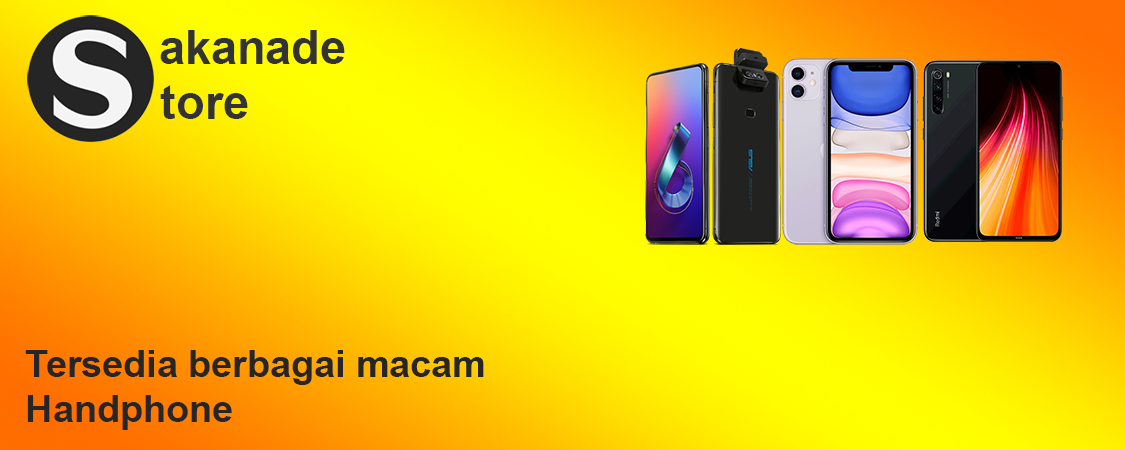
<style>
.page{position:relative;width:1125px;height:450px}
.page>*{position:absolute;margin:0}
.t1{font:47.4px "Arial-BoldMT";color:#333333}
.t2{font:37.5px "Arial-BoldMT";color:#262626}
</style>
<div class="page">
<p class="t1" style="left:160px;top:30px;width:185px;height:34px">akanade</p>
<p class="t1" style="left:160px;top:85px;width:88px;height:34px">tore</p>
<p class="t2" style="left:25px;top:350px;width:459px;height:80px">Tersedia berbagai macam<br>Handphone</p>
</div>
